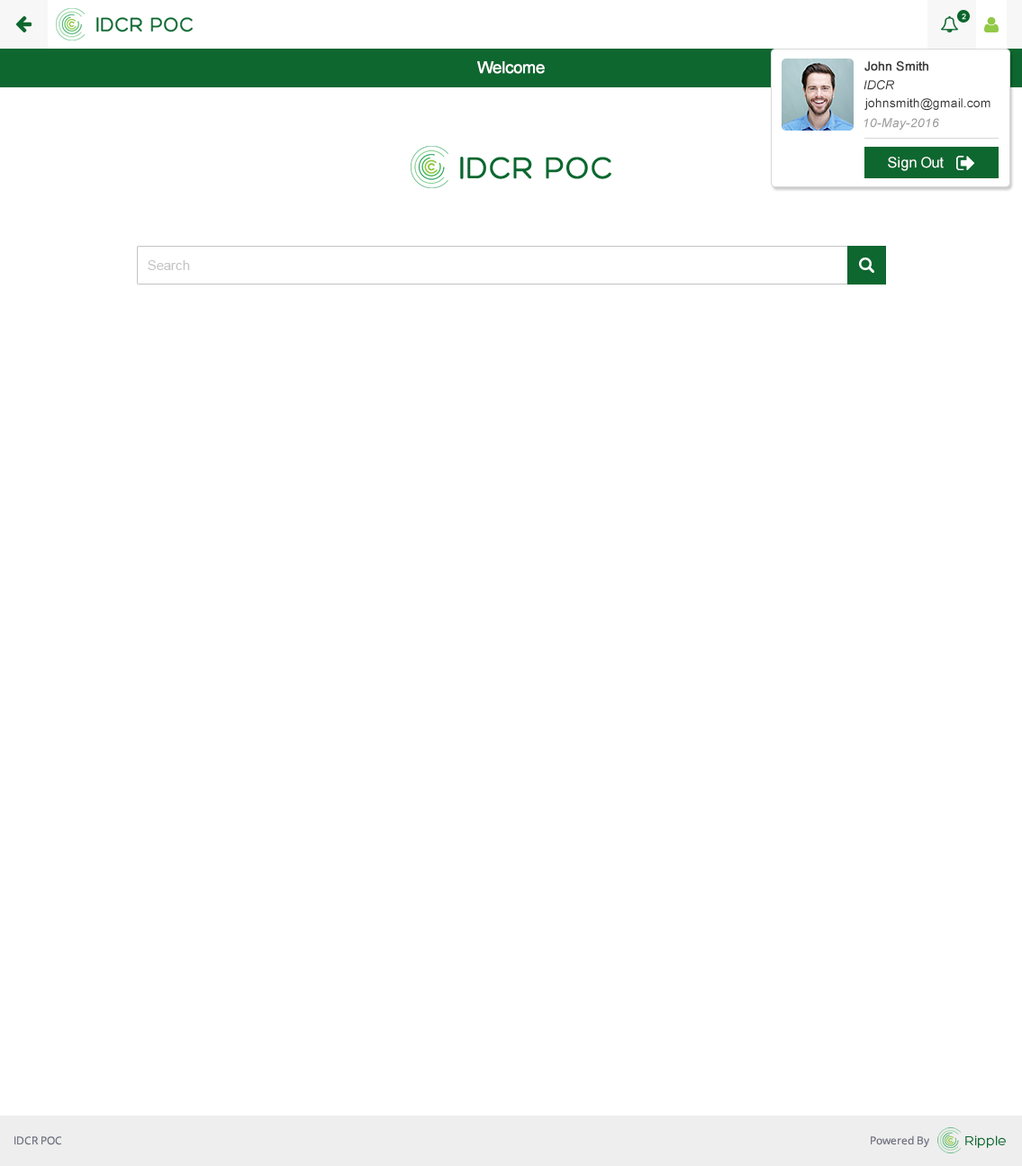
<style>
.page{position:relative;width:1022px;height:1166px;background:#ffffff}
.page>*{position:absolute;margin:0}
.t1{font:16.2px "ArialMT";color:#ffffff;font-weight:bold}
.t2{font:12.6px "ArialMT";color:#3c3c3c;font-weight:bold}
.t3{font:12.6px "Arial-ItalicMT";color:#3c3c3c}
.t4{font:12.6px "ArialMT";color:#3c3c3c}
.t5{font:12.6px "Arial-ItalicMT";color:#9c9c9c}
.t6{font:14.4px "ArialMT";color:#ffffff}
.t7{font:13.5px "ArialMT";color:#c5c5c5}
</style>
<div class="page">
<p class="t1" style="left:477px;top:61px;width:68px;height:13px">Welcome</p>
<p class="t2" style="left:865px;top:61px;width:64px;height:10px">John Smith</p>
<p class="t3" style="left:864px;top:80px;width:30px;height:10px">IDCR</p>
<p class="t4" style="left:865px;top:98px;width:126px;height:13px">johnsmith@gmail.com</p>
<p class="t5" style="left:864px;top:118px;width:75px;height:12px">10-May-2016</p>
<p class="t6" style="left:888px;top:157px;width:56px;height:14px">Sign Out</p>
<p class="t7" style="left:148px;top:260px;width:42px;height:10px">Search</p>
</div>
